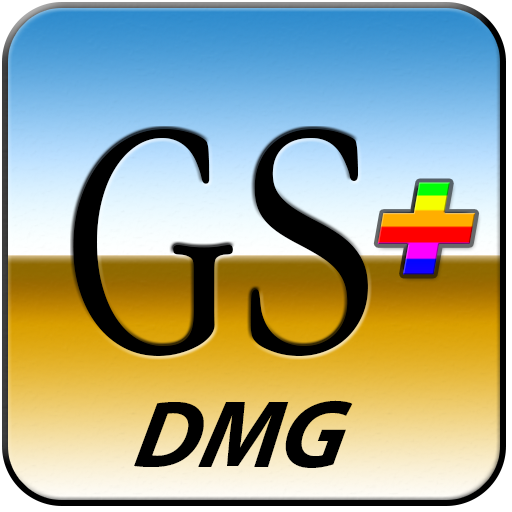
<style>
.page{position:relative;width:512px;height:512px}
.page>*{position:absolute;margin:0}
.t1{font:340.9px "AppleGaramondLight";color:#000000;scale:0.88 1}
.t2{font:340.9px "AppleGaramondLight";color:#000000;scale:1.04 1}
.t3{font:245px "Beta";font-style:italic}
.t4{font:96.8px "MyriadPro-BoldIt";color:#000000;font-style:italic}
</style>
<div class="page">
<p class="t1" style="left:73px;top:129px;width:295px;height:227px">G<span class="t2">S</span></p>
<p class="t3" style="left:377px;top:182px;width:99px;height:93px">+</p>
<p class="t4" style="left:134px;top:400px;width:219px;height:68px">DMG</p>
</div>
